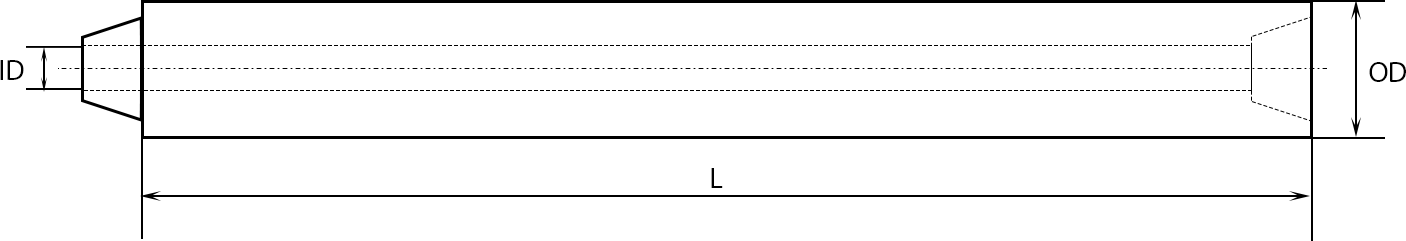
<style>
.page{position:relative;width:1406px;height:241px;background:#ffffff}
.page>*{position:absolute;margin:0}
.t1{font:7px "MyriadPro-Regular";color:#000000}
</style>
<div class="page">
<p class="t1" style="left:0px;top:60px;width:24px;height:20px">ID</p>
<p class="t1" style="left:1369px;top:62px;width:37px;height:20px">OD</p>
<p class="t1" style="left:711px;top:168px;width:12px;height:20px">L</p>
</div>
